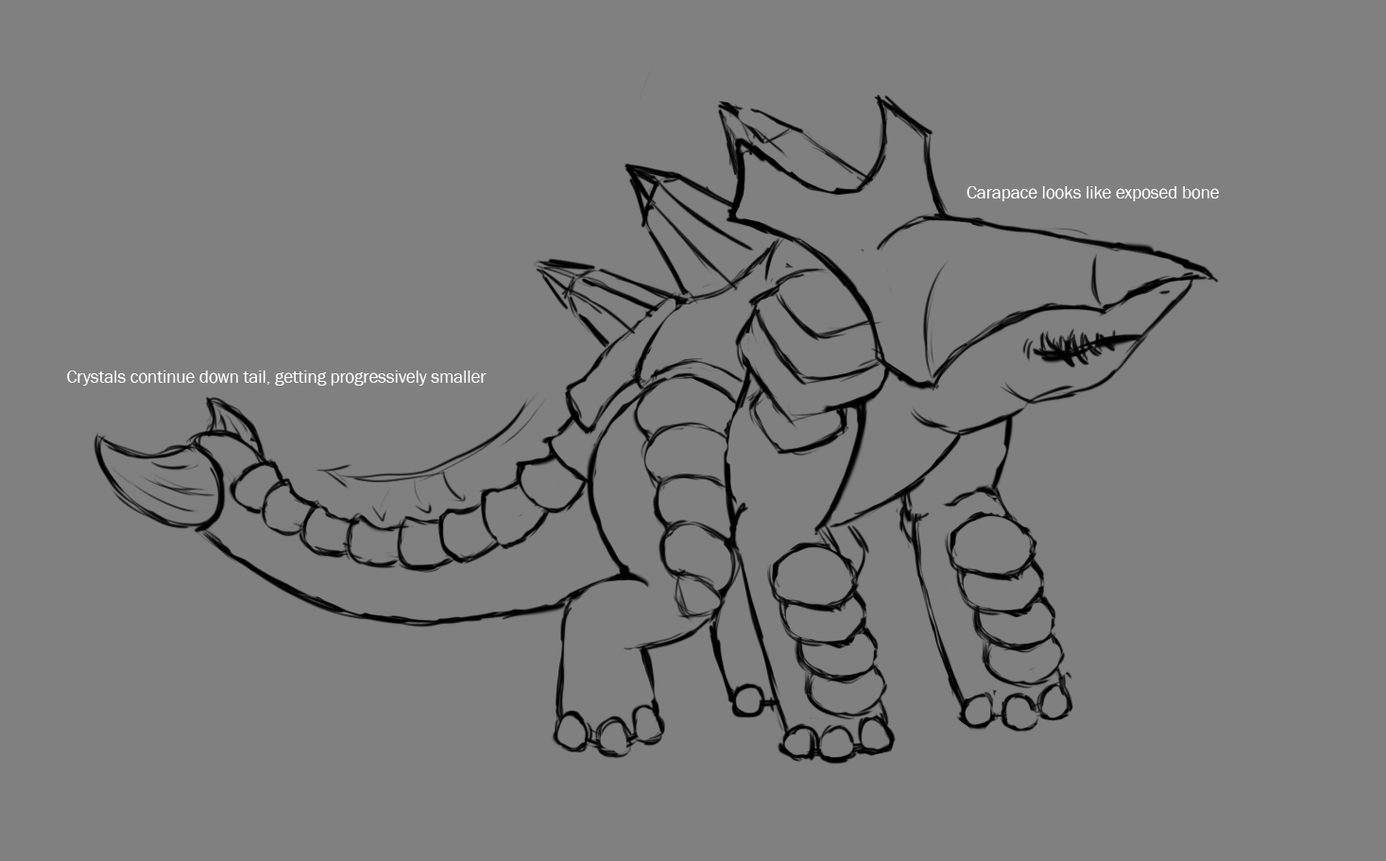
<style>
.page{position:relative;width:1386px;height:861px;background:#808080}
.page>*{position:absolute;margin:0}
.t1{font:17.6px "FranklinGothic-Book";color:#ffffff}
</style>
<div class="page">
<p class="t1" style="left:966px;top:186px;width:253px;height:15px">Carapace looks like exposed bone</p>
<p class="t1" style="left:67px;top:370px;width:419px;height:15px">Crystals continue down tail, getting progressively smaller</p>
</div>
